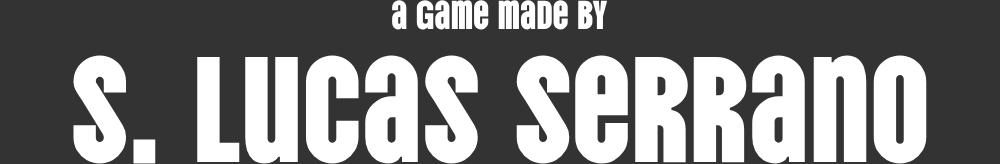
<style>
.page{position:relative;width:1000px;height:164px;background:#333333}
.page>*{position:absolute;margin:0}
.t1{font:40.5px "VinaSans-Regular";color:#ffffff}
.t2{font:150px "VinaSans-Regular";color:#ffffff}
</style>
<div class="page">
<p class="t1" style="left:392px;top:0px;width:215px;height:30px">a game made by</p>
<p class="t2" style="left:73px;top:55px;width:854px;height:109px">S. Lucas Serrano</p>
</div>
